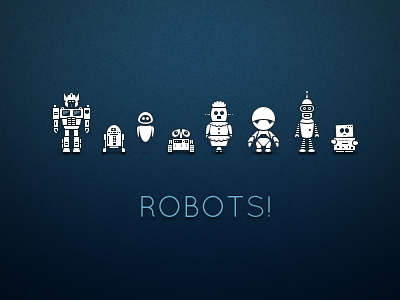
<style>
.page{position:relative;width:400px;height:300px}
.page>*{position:absolute;margin:0}
.t1{font:30px "QuicksandBook-Regular";color:#6ab9dd}
</style>
<div class="page">
<p class="t1" style="left:141px;top:195px;width:129px;height:22px">ROBOTS!</p>
</div>
